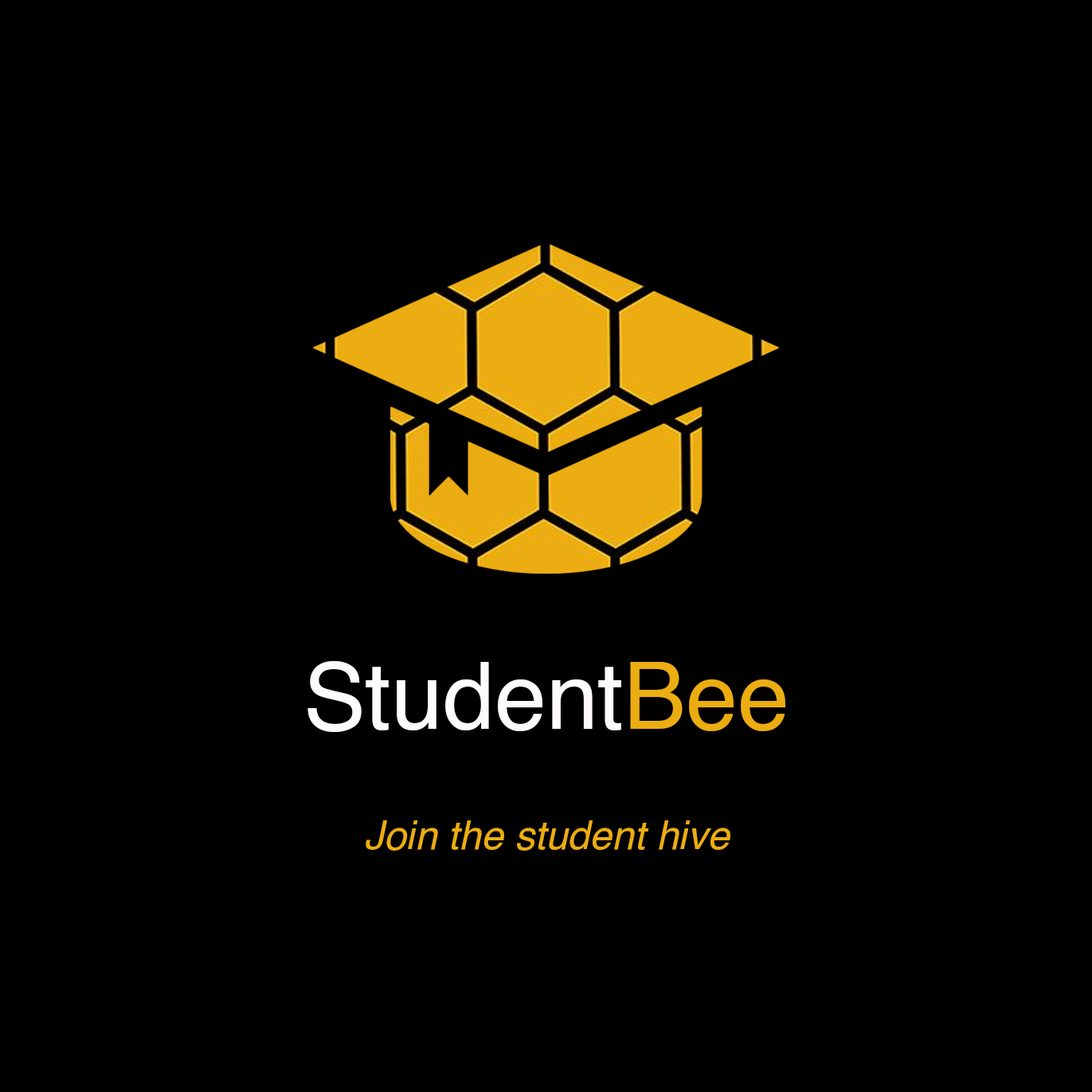
<style>
.page{position:relative;width:1092px;height:1092px;background:#000000}
.page>*{position:absolute;margin:0}
.t1{font:93px "Helvetica";color:#fdfbfb}
.t2{font:93px "Helvetica";color:#ecad12}
.t3{font:39.8px "Helvetica-Oblique";color:#ecad12}
</style>
<div class="page">
<p class="t1" style="left:307px;top:661px;width:478px;height:71px">Student<span class="t2">Bee</span></p>
<p class="t3" style="left:366px;top:820px;width:364px;height:31px">Join the student hive</p>
</div>
